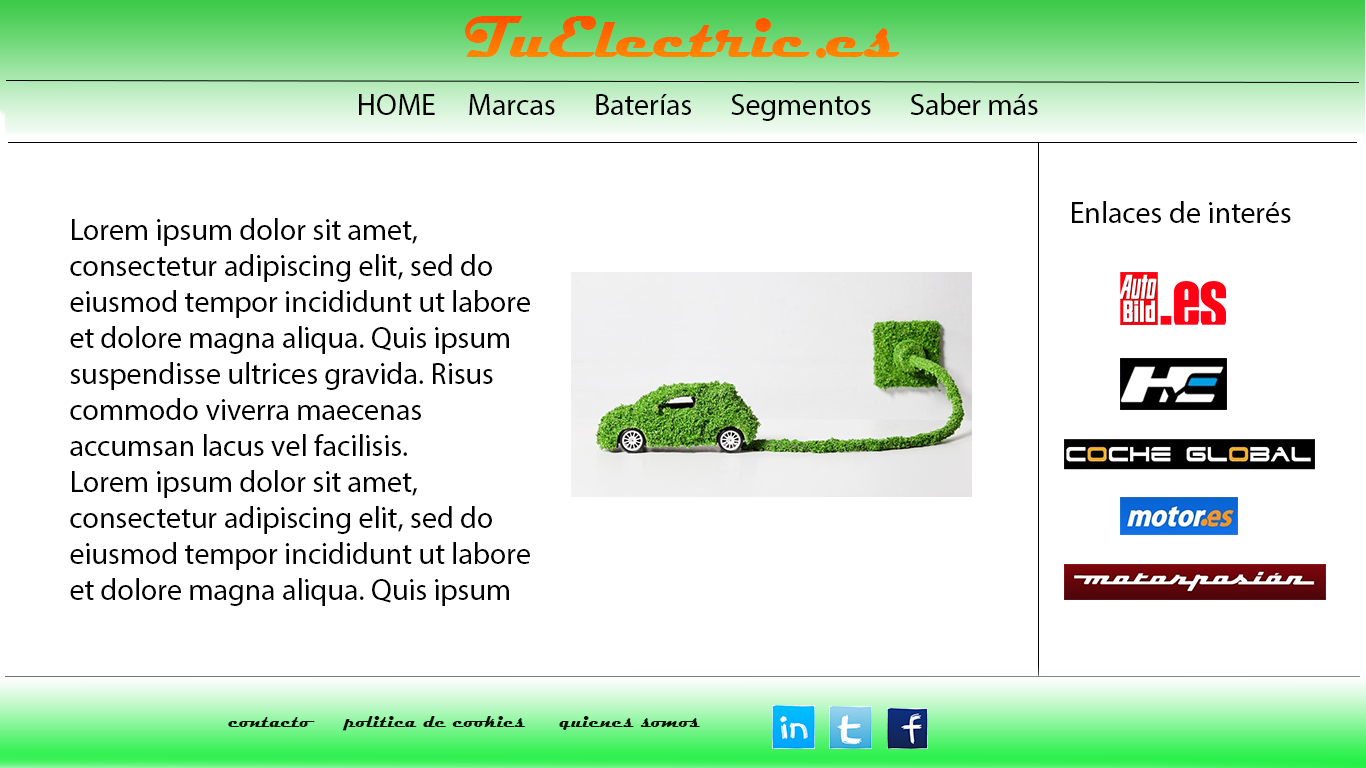
<style>
.page{position:relative;width:1366px;height:768px;background:#ffffff}
.page>*{position:absolute;margin:0}
.t1{font:60px "Magneto-Bold";color:#ff7800}
.t2{font:30px "MyriadPro-Regular";color:#000000}
.t3{font:18px "Magneto-Bold";color:#021002}
</style>
<div class="page">
<p class="t1" style="left:465px;top:16px;width:435px;height:42px">TuElectric.es</p>
<p class="t2" style="left:359px;top:93px;width:679px;height:28px">HOME     Marcas      Baterías      Segmentos      Saber más</p>
<p class="t2" style="left:1072px;top:201px;width:219px;height:22px">Enlaces de interés</p>
<p class="t2" style="left:70px;top:218px;width:460px;height:388px">Lorem ipsum dolor sit amet, consectetur adipiscing elit, sed do eiusmod tempor incididunt ut labore et dolore magna aliqua. Quis ipsum suspendisse ultrices gravida. Risus commodo viverra maecenas accumsan lacus vel facilisis. <br>Lorem ipsum dolor sit amet, consectetur adipiscing elit, sed do eiusmod tempor incididunt ut labore et dolore magna aliqua. Quis ipsum suspendisse ultrices gravida. Risus commodo viverra maecenas accumsan lacus vel facilisis.</p>
<p class="t3" style="left:228px;top:716px;width:472px;height:15px">contacto     politica de cookies     quienes somos</p>
</div>
